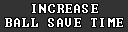
<style>
.page{position:relative;width:128px;height:32px;background:#333333}
.page>*{position:absolute;margin:0}
.t1{font:12px/14px "Terminal";letter-spacing:0.1em;color:#ffffff}
</style>
<div class="page">
<p class="t1" style="left:5px;top:4px;width:118px;height:23px;text-align:center">INCREASE<br>BALL SAVE TIME</p>
</div>
